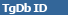
<style>
.page{position:relative;width:68px;height:15px;background:#336699}
.page>*{position:absolute;margin:0}
.t1{font:11px "Verdana-Bold";letter-spacing:-0.08em;color:#ffffff}
</style>
<div class="page">
<p class="t1" style="left:2px;top:3px;width:46px;height:11px">TgDb ID</p>
</div>
